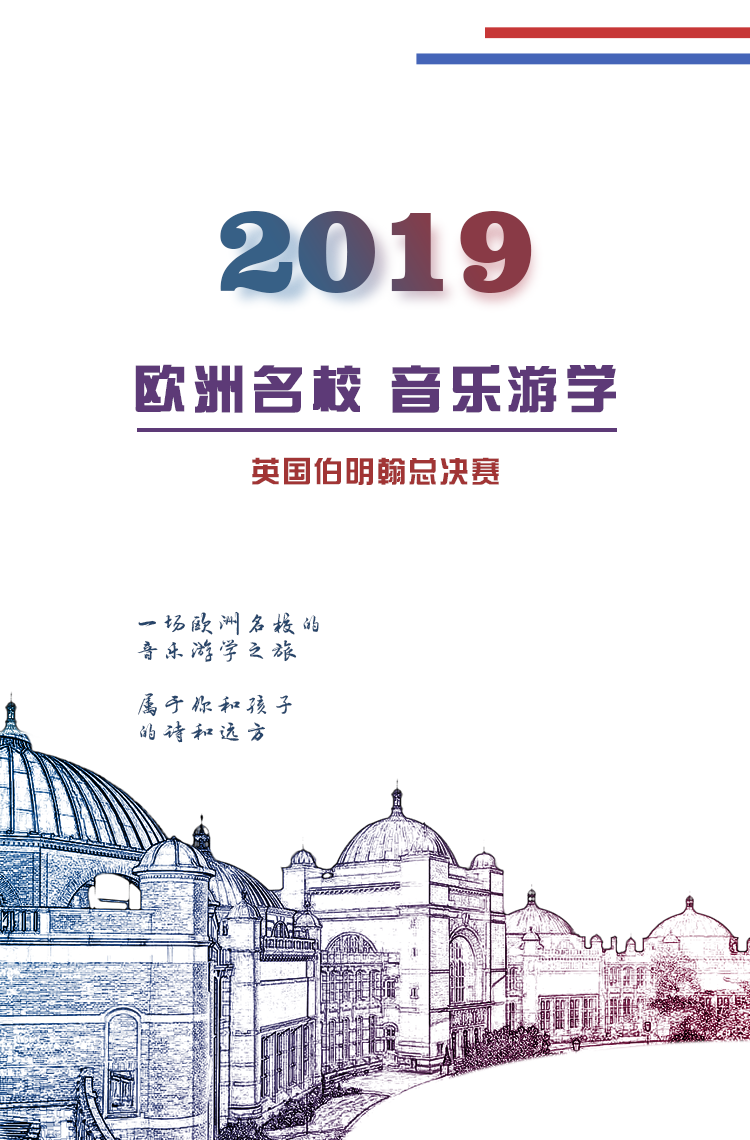
<style>
.page{position:relative;width:750px;height:1140px;background:#ffffff}
.page>*{position:absolute;margin:0}
.t1{font:128.7px "ClarendonBT-Black";letter-spacing:-0.025em}
.t2{font:52.1px "FZZYJW--GB1-0";letter-spacing:0.1em;color:#5d3a77;font-weight:bold}
.t3{font:30px "FZZYJW--GB1-0";letter-spacing:0.05em;color:#a13535}
.t4{font:26px/27.1px "·½ÕýÂÀ½¨µÂ×ÖÌå";letter-spacing:0.05em;color:#27456a}
</style>
<div class="page">
<p class="t1" style="left:220px;top:211px;width:312px;height:82px">2019</p>
<p class="t2" style="left:135px;top:364px;width:481px;height:49px">欧洲名校 音乐游学</p>
<p class="t3" style="left:252px;top:457px;width:247px;height:28px">英国伯明翰总决赛</p>
<p class="t4" style="left:137px;top:611px;width:182px;height:132px">一场欧洲名校的<br>音乐游学之旅<br><br>属于你和孩子<br>的诗和远方</p>
</div>
